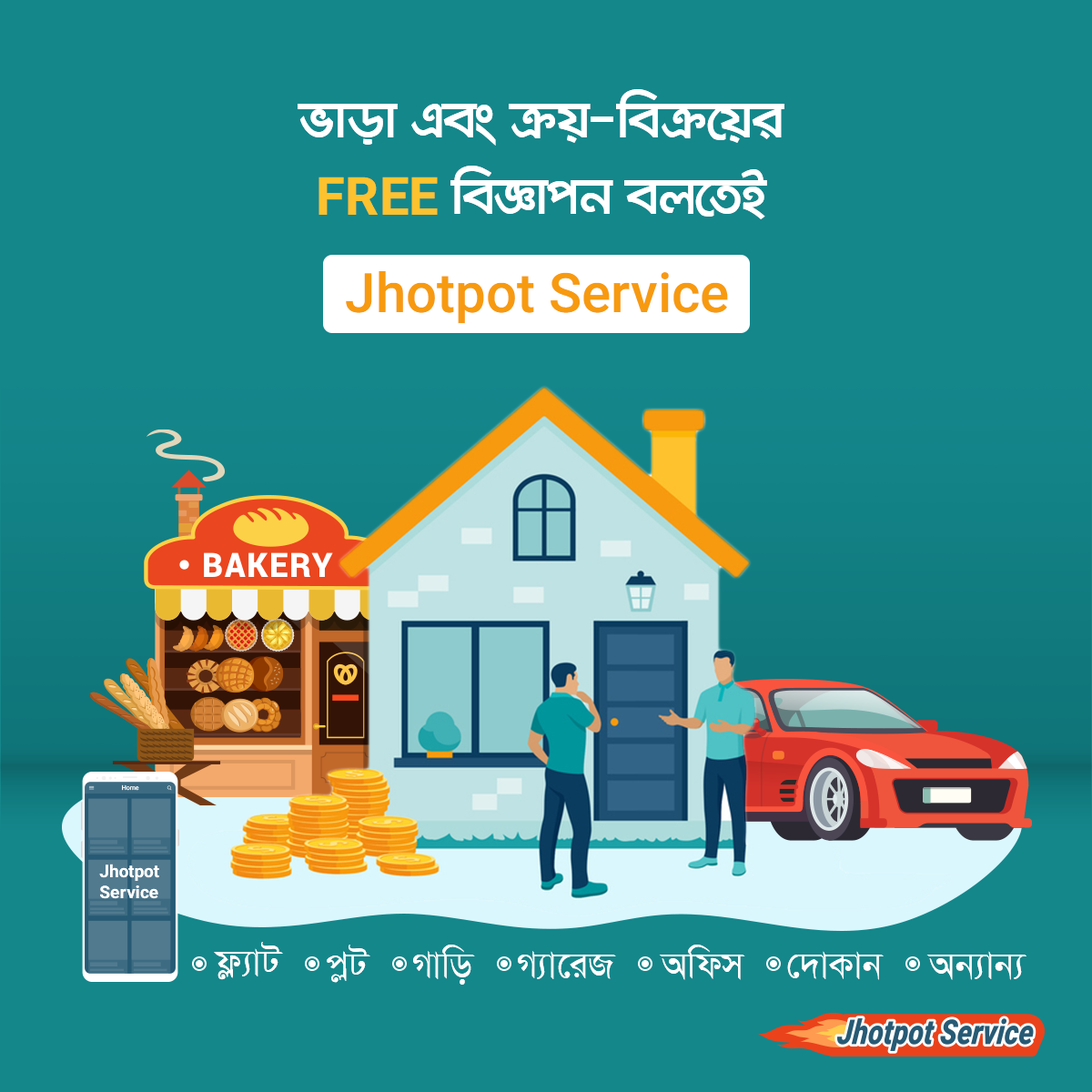
<style>
.page{position:relative;width:1092px;height:1092px;background:#14878b}
.page>*{position:absolute;margin:0}
.t1{font:63.8px "KongshoMJ-Bold";color:#ffffff}
.t2{font:53.2px "Roboto-Bold";color:#fec22e}
.t3{font:54.6px "Roboto-Medium";color:#f79a0f}
.t4{font:17.4px "Roboto-Bold";color:#ffffff}
.t5{font:43.7px "SutonnyMJ-Regular";color:#ffffff}
</style>
<div class="page">
<p class="t1" style="left:298px;top:89px;width:486px;height:130px;text-align:center">fvov Ges µq-weµ‡qi<br><span class="t2">FREE </span>weÁvcb ej‡ZB</p>
<p class="t3" style="left:346px;top:271px;width:382px;height:53px">Jhotpot Service</p>
<p class="t4" style="left:99px;top:864px;width:60px;height:35px">Jhotpot<br>Service</p>
<p class="t5" style="left:214px;top:942px;width:69px;height:38px">d¬¨vU</p>
<p class="t5" style="left:327px;top:945px;width:43px;height:38px">cøU</p>
<p class="t5" style="left:413px;top:945px;width:62px;height:40px">Mvwo</p>
<p class="t5" style="left:518px;top:951px;width:98px;height:28px">M¨v‡iR</p>
<p class="t5" style="left:659px;top:945px;width:86px;height:35px">Awdm</p>
<p class="t5" style="left:787px;top:951px;width:97px;height:29px">†`vKvb</p>
<p class="t5" style="left:926px;top:951px;width:100px;height:29px">Ab¨vb¨</p>
</div>
